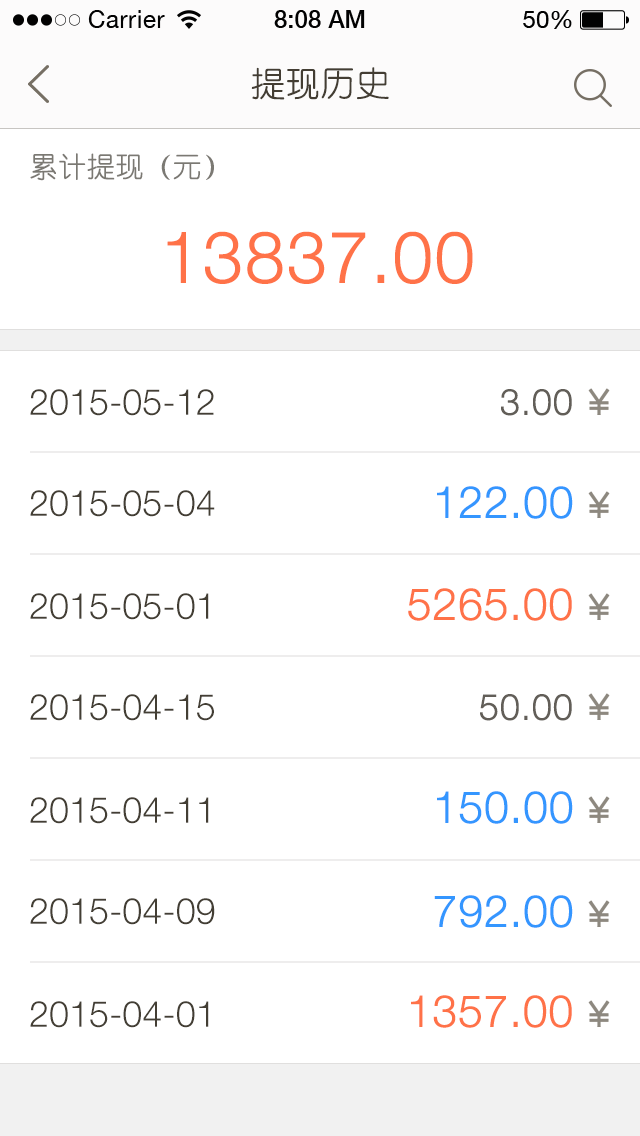
<style>
.page{position:relative;width:640px;height:1136px;background:#ffffff}
.page>*{position:absolute;margin:0}
.t1{font:34px "YouYuan";color:#433d33;text-transform:uppercase;font-weight:bold}
.t2{font:28px "YouYuan";color:#7b7973;text-transform:uppercase;font-weight:bold}
.t3{font:72px "HelveticaNeueLTPro-Lt";color:#ff7248;text-transform:uppercase;font-weight:bold}
.t4{font:36px "HelveticaNeueLTPro-Lt";color:#433e34;text-transform:uppercase}
.t5{font:36px "HelveticaNeueLTPro-Lt";color:#625e58;text-transform:uppercase;font-weight:bold}
.t6{font:44px "HelveticaNeueLTPro-Lt";color:#3496ff;text-transform:uppercase;font-weight:bold}
.t7{font:44px "HelveticaNeueLTPro-Lt";color:#ff7248;text-transform:uppercase;font-weight:bold}
</style>
<div class="page">
<p class="t1" style="left:251px;top:67px;width:138px;height:33px">提现历史</p>
<p class="t2" style="left:30px;top:153px;width:184px;height:28px">累计提现（元）</p>
<p class="t3" style="left:167px;top:231px;width:306px;height:53px">13837.00</p>
<p class="t4" style="left:30px;top:389px;width:184px;height:27px">2015-05-12</p>
<p class="t5" style="left:501px;top:389px;width:71px;height:27px">3.00</p>
<p class="t6" style="left:437px;top:486px;width:136px;height:33px">122.00</p>
<p class="t4" style="left:30px;top:490px;width:185px;height:27px">2015-05-04</p>
<p class="t4" style="left:30px;top:593px;width:179px;height:27px">2015-05-01</p>
<p class="t7" style="left:408px;top:588px;width:164px;height:33px">5265.00</p>
<p class="t4" style="left:30px;top:694px;width:184px;height:27px">2015-04-15</p>
<p class="t5" style="left:480px;top:694px;width:92px;height:27px">50.00</p>
<p class="t4" style="left:30px;top:797px;width:179px;height:27px">2015-04-11</p>
<p class="t6" style="left:437px;top:791px;width:136px;height:33px">150.00</p>
<p class="t4" style="left:30px;top:898px;width:185px;height:27px">2015-04-09</p>
<p class="t6" style="left:434px;top:895px;width:139px;height:33px">792.00</p>
<p class="t4" style="left:30px;top:1001px;width:179px;height:27px">2015-04-01</p>
<p class="t7" style="left:411px;top:995px;width:161px;height:33px">1357.00</p>
</div>
